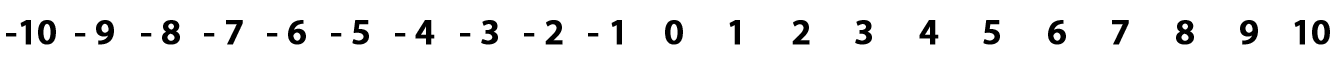
<style>
.page{position:relative;width:1344px;height:64px;background:#ffffff}
.page>*{position:absolute;margin:0}
.t1{font:36px "MyriadPro-Semibold";color:#000000;font-weight:bold}
</style>
<div class="page">
<p class="t1" style="left:6px;top:20px;width:50px;height:25px">-10</p>
<p class="t1" style="left:75px;top:20px;width:39px;height:25px">- 9</p>
<p class="t1" style="left:141px;top:20px;width:39px;height:25px">- 8</p>
<p class="t1" style="left:204px;top:20px;width:39px;height:25px">- 7</p>
<p class="t1" style="left:267px;top:20px;width:39px;height:25px">- 6</p>
<p class="t1" style="left:331px;top:20px;width:38px;height:25px">- 5</p>
<p class="t1" style="left:395px;top:20px;width:40px;height:25px">- 4</p>
<p class="t1" style="left:460px;top:20px;width:38px;height:25px">- 3</p>
<p class="t1" style="left:524px;top:20px;width:39px;height:25px">- 2</p>
<p class="t1" style="left:588px;top:20px;width:34px;height:25px">- 1</p>
<p class="t1" style="left:665px;top:20px;width:18px;height:25px">0</p>
<p class="t1" style="left:729px;top:20px;width:11px;height:25px">1</p>
<p class="t1" style="left:792px;top:20px;width:18px;height:25px">2</p>
<p class="t1" style="left:855px;top:20px;width:17px;height:25px">3</p>
<p class="t1" style="left:919px;top:20px;width:20px;height:25px">4</p>
<p class="t1" style="left:983px;top:20px;width:17px;height:25px">5</p>
<p class="t1" style="left:1048px;top:20px;width:18px;height:25px">6</p>
<p class="t1" style="left:1112px;top:20px;width:17px;height:25px">7</p>
<p class="t1" style="left:1176px;top:20px;width:18px;height:25px">8</p>
<p class="t1" style="left:1240px;top:20px;width:18px;height:25px">9</p>
<p class="t1" style="left:1294px;top:20px;width:36px;height:25px">10</p>
</div>
